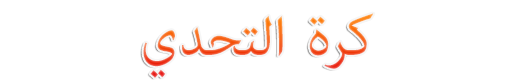
<style>
.page{position:relative;width:512px;height:83px;background:#ffffff}
.page>*{position:absolute;margin:0}
.t1{font:78.4px "AdobeArabic-Regular"}
</style>
<div class="page">
<p class="t1" style="left:143px;top:13px;width:231px;height:65px">كرة التحدي</p>
</div>
